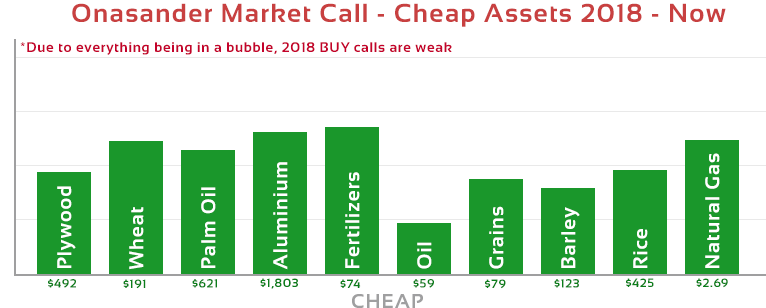
<style>
.page{position:relative;width:766px;height:308px;background:#ffffff}
.page>*{position:absolute;margin:0}
.t1{font:26px "Sansation-Bold";letter-spacing:0.05em;color:#c84040}
.t2{font:14px "Sansation-Bold";letter-spacing:0.05em;color:#c4022b}
.t3{font:20px "Sansation-Bold";letter-spacing:0.05em;color:#ffffff}
.t4{font:12px "Sansation-Bold";letter-spacing:0.05em;color:#0a7e1a}
</style>
<div class="page">
<p class="t1" style="left:72px;top:3px;width:654px;height:24px">Onasander Market Call - Cheap Assets 2018 - Now</p>
<p class="t2" style="left:20px;top:42px;width:432px;height:13px">*Due to everything being in a bubble, 2018 BUY calls are weak</p>
<p class="t3" style="left:705px;top:153px;width:15px;height:115px;rotate:-90deg">Natural Gas</p>
<p class="t3" style="left:273px;top:162px;width:15px;height:108px;rotate:-90deg">Aluminium</p>
<p class="t3" style="left:345px;top:172px;width:15px;height:96px;rotate:-90deg">Fertilizers</p>
<p class="t3" style="left:57px;top:186px;width:19px;height:82px;rotate:-90deg">Plywood</p>
<p class="t3" style="left:201px;top:187px;width:15px;height:81px;rotate:-90deg">Palm Oil</p>
<p class="t3" style="left:129px;top:207px;width:15px;height:63px;rotate:-90deg">Wheat</p>
<p class="t3" style="left:489px;top:206px;width:15px;height:63px;rotate:-90deg">Grains</p>
<p class="t3" style="left:561px;top:207px;width:19px;height:61px;rotate:-90deg">Barley</p>
<p class="t3" style="left:633px;top:229px;width:15px;height:39px;rotate:-90deg">Rice</p>
<p class="t3" style="left:417px;top:242px;width:15px;height:27px;rotate:-90deg">Oil</p>
<p class="t4" style="left:48px;top:279px;width:28px;height:9px">$492</p>
<p class="t4" style="left:123px;top:279px;width:23px;height:10px">$191</p>
<p class="t4" style="left:192px;top:279px;width:25px;height:9px">$621</p>
<p class="t4" style="left:260px;top:278px;width:38px;height:11px">$1,803</p>
<p class="t4" style="left:340px;top:279px;width:21px;height:9px">$74</p>
<p class="t4" style="left:413px;top:279px;width:21px;height:9px">$59</p>
<p class="t4" style="left:485px;top:279px;width:21px;height:10px">$79</p>
<p class="t4" style="left:554px;top:279px;width:25px;height:9px">$123</p>
<p class="t4" style="left:626px;top:278px;width:28px;height:9px">$425</p>
<p class="t4" style="left:696px;top:278px;width:32px;height:10px">$2.69</p>
</div>
